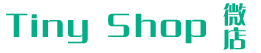
<style>
.page{position:relative;width:261px;height:53px;background:#ffffff}
.page>*{position:absolute;margin:0}
.t1{font:24px/24px "FZCQJW--GB1-0";letter-spacing:0.1em;color:#03ae87}
.t2{font:36px "FZCQJW--GB1-0";letter-spacing:0.1em;color:#03ae87}
</style>
<div class="page">
<p class="t1" style="left:223px;top:3px;width:23px;height:47px;text-align:center">微<br>店</p>
<p class="t2" style="left:6px;top:13px;width:200px;height:31px">Tiny Shop</p>
</div>
